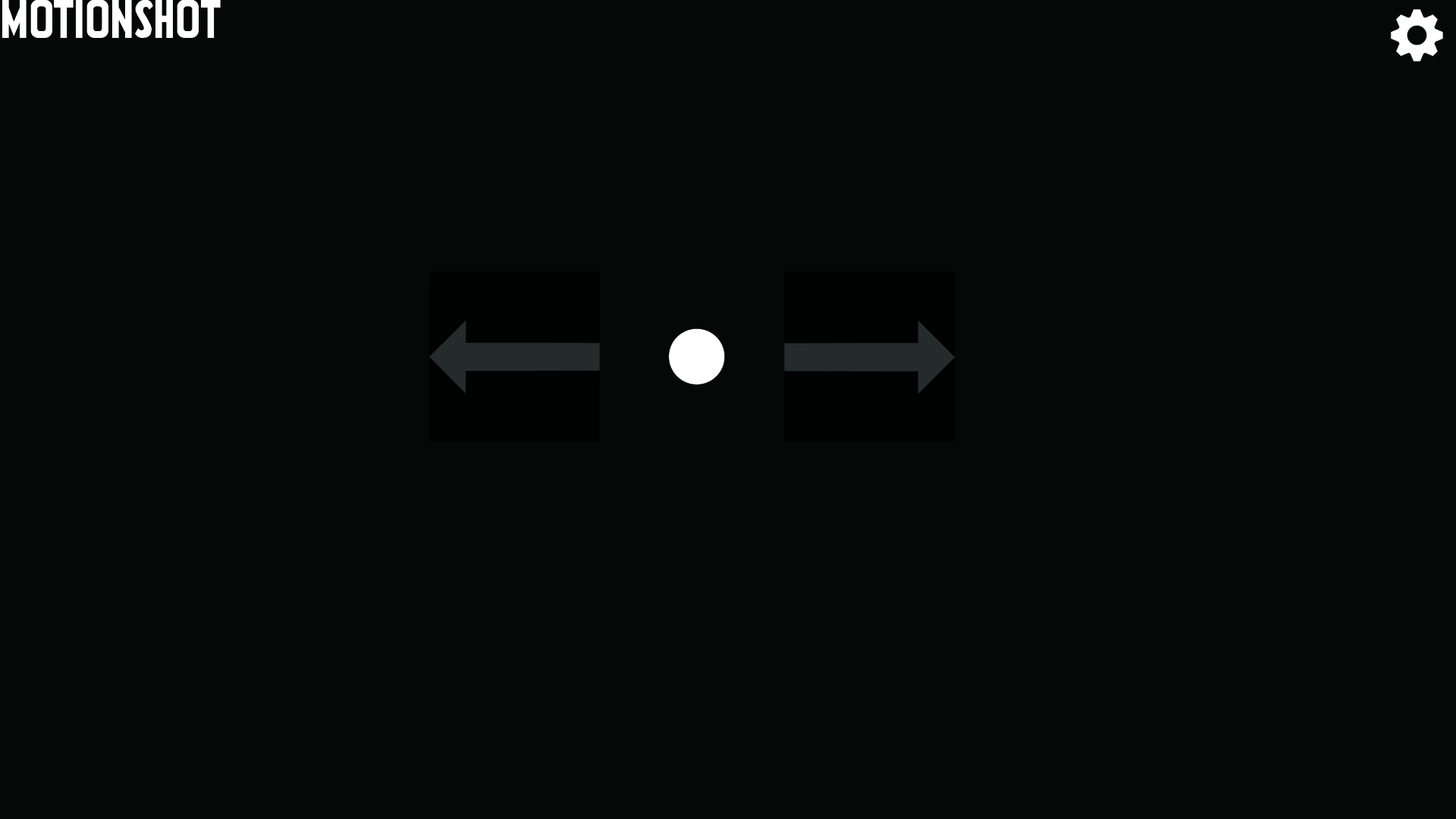
<style>
.page{position:relative;width:1456px;height:819px;background:#060808}
.page>*{position:absolute;margin:0}
.t1{font:54.6px "AkiraJimboRegular";color:#ffffff}
</style>
<div class="page">
<p class="t1" style="left:2px;top:0px;width:219px;height:38px">motionshot</p>
</div>
